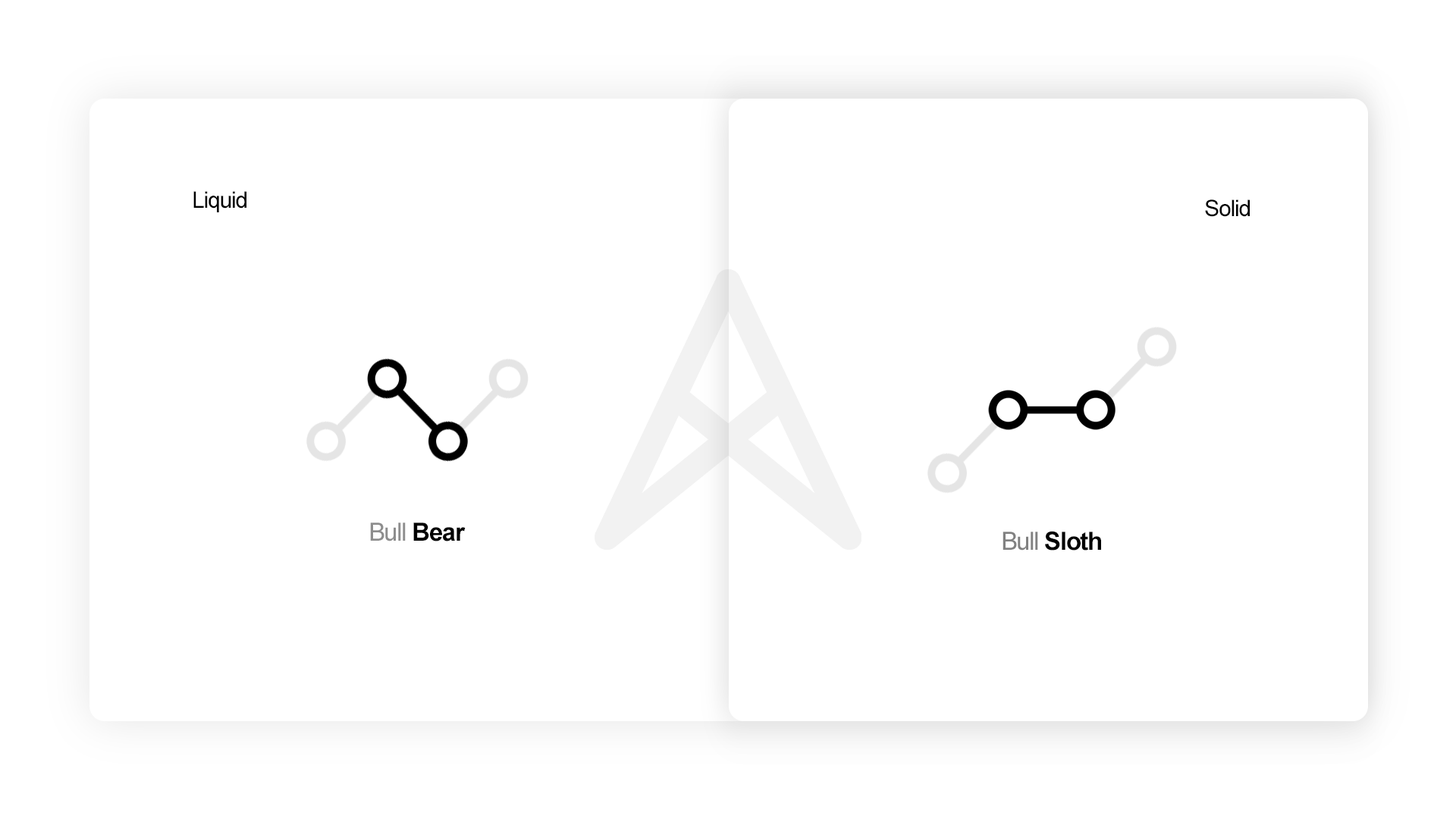
<style>
.page{position:relative;width:1456px;height:819px;background:#ffffff}
.page>*{position:absolute;margin:0}
.t1{font:22.7px "ArialMT";letter-spacing:-0.04em;color:#000000}
.t2{font:25px "ArialMT";letter-spacing:-0.04em;color:#8d8d8d}
.t3{font:25px "Arial-BoldMT";letter-spacing:-0.04em;color:#000000}
.t4{font:25px "ArialMT";letter-spacing:-0.04em;color:#818181}
</style>
<div class="page">
<p class="t1" style="left:193px;top:191px;width:53px;height:21px">Liquid</p>
<p class="t1" style="left:1205px;top:199px;width:45px;height:18px">Solid</p>
<p class="t2" style="left:370px;top:522px;width:96px;height:19px">Bull <span class="t3">Bear</span></p>
<p class="t3" style="left:1003px;top:531px;width:98px;height:20px"><span class="t4">Bull </span>Sloth</p>
</div>
